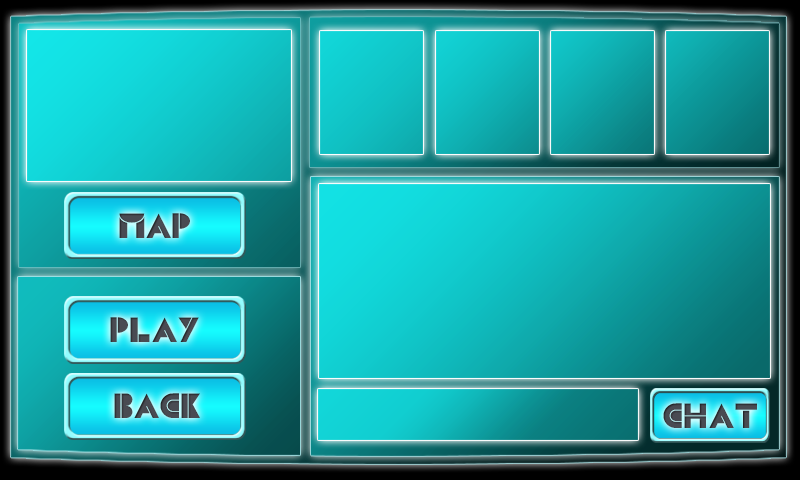
<style>
.page{position:relative;width:800px;height:480px}
.page>*{position:absolute;margin:0}
.t1{font:36px "CSBlocks";color:#494b52}
</style>
<div class="page">
<p class="t1" style="left:119px;top:213px;width:71px;height:25px">map</p>
<p class="t1" style="left:110px;top:317px;width:89px;height:25px">Play</p>
<p class="t1" style="left:114px;top:393px;width:86px;height:25px">Back</p>
<p class="t1" style="left:663px;top:403px;width:94px;height:25px">chat</p>
</div>
